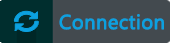
<style>
.page{position:relative;width:170px;height:43px;background:#434a4f}
.page>*{position:absolute;margin:0}
.t1{font:20px "SegoeUI";color:#0ba1e0;font-weight:bold}
</style>
<div class="page">
<p class="t1" style="left:59px;top:14px;width:105px;height:16px">Connection</p>
</div>
